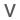
<style>
.page{position:relative;width:20px;height:20px;background:#ffffff}
.page>*{position:absolute;margin:0}
.t1{font:18px "Helvetica";color:#555555}
</style>
<div class="page">
<p class="t1" style="left:4px;top:4px;width:12px;height:13px">V</p>
</div>
